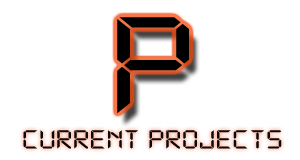
<style>
.page{position:relative;width:300px;height:160px;background:#ffffff}
.page>*{position:absolute;margin:0}
.t1{font:150.7px "DS-Digital";letter-spacing:-0.02em;color:#000000;scale:1.25 1}
.t2{font:28.7px "DS-Digital";letter-spacing:-0.02em;color:#090909;scale:1.25 1}
</style>
<div class="page">
<p class="t1" style="left:117px;top:17px;width:72px;height:97px">p</p>
<p class="t2" style="left:23px;top:130px;width:259px;height:19px">current projects</p>
</div>
